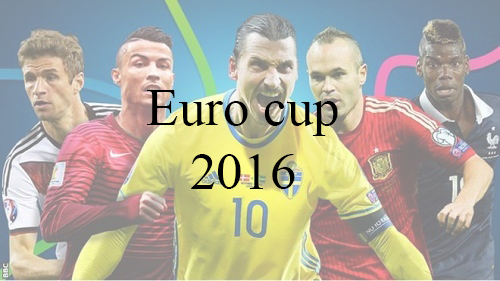
<style>
.page{position:relative;width:500px;height:281px}
.page>*{position:absolute;margin:0}
.t1{font:53.3px "TimesNewRomanPSMT";color:#000000}
</style>
<div class="page">
<p class="t1" style="left:147px;top:90px;width:191px;height:99px;text-align:center">Euro cup<br>2016</p>
</div>
